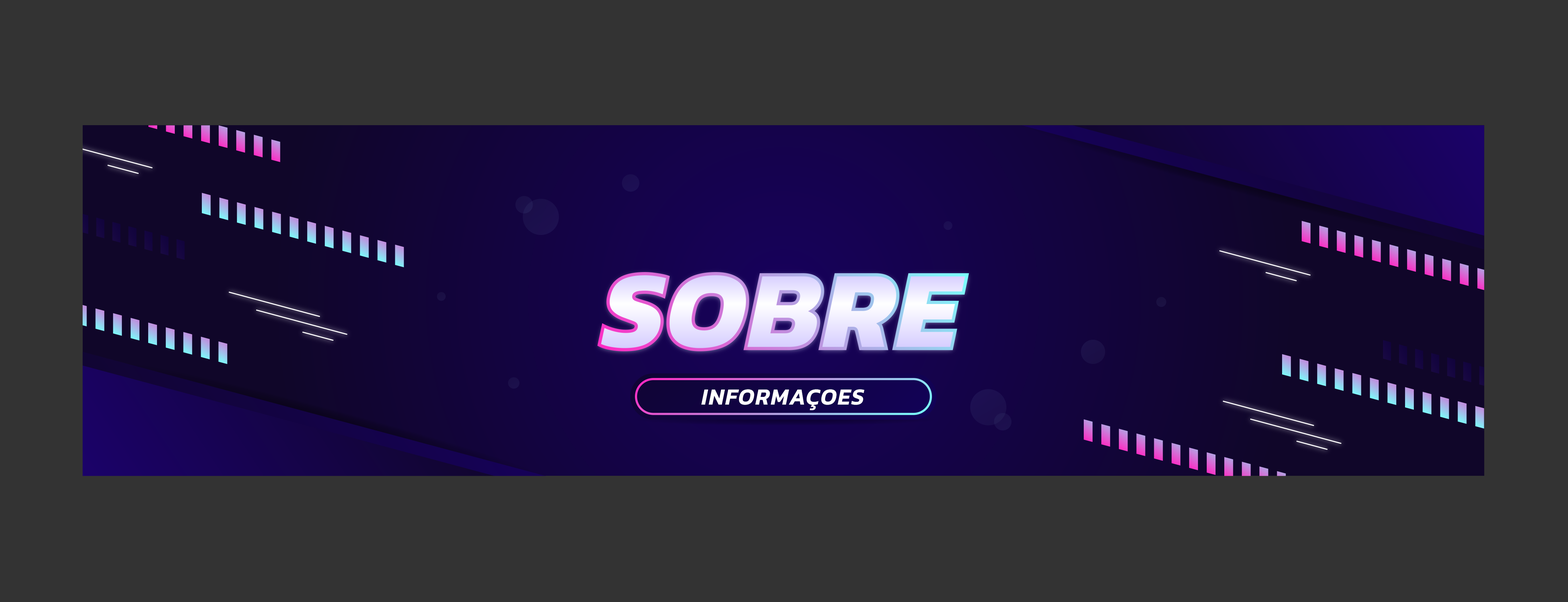
<style>
.page{position:relative;width:1568px;height:602px;background:#333333}
.page>*{position:absolute;margin:0}
.t1{font:114.4px "Kanit-ExtraBoldItalic";text-transform:uppercase}
.t2{font:22.7px "Kanit-SemiBoldItalic";letter-spacing:0.05em;color:#ffffff;text-transform:uppercase}
</style>
<div class="page">
<p class="t1" style="left:599px;top:273px;width:368px;height:77px">sobre</p>
<p class="t2" style="left:701px;top:389px;width:163px;height:21px">informaçoes</p>
</div>
